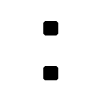
<style>
.page{position:relative;width:100px;height:100px;background:#ffffff}
.page>*{position:absolute;margin:0}
.t1{font:125px "SimHei";color:#000000;font-weight:bold}
</style>
<div class="page">
<p class="t1" style="left:43px;top:21px;width:16px;height:60px">:</p>
</div>
